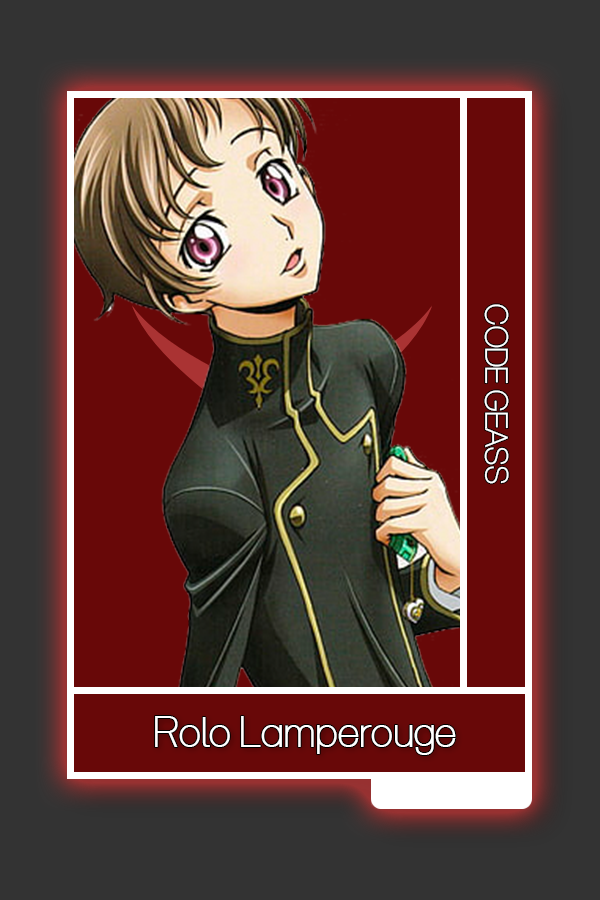
<style>
.page{position:relative;width:600px;height:900px;background:#680808}
.page>*{position:absolute;margin:0}
.t1{font:31.2px "Aliquam";color:#ffffff}
.t2{font:43.2px "Aliquam";color:#ffffff}
</style>
<div class="page">
<p class="t1" style="left:484px;top:304px;width:25px;height:180px;rotate:90deg">CODE GEASS</p>
<p class="t2" style="left:155px;top:716px;width:301px;height:39px">Rolo Lamperouge</p>
</div>
